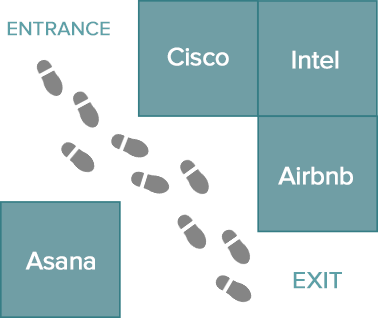
<style>
.page{position:relative;width:378px;height:318px;background:#ffffff}
.page>*{position:absolute;margin:0}
.t1{font:20px "ProximaNova-Regular";letter-spacing:-0.007em;color:#5da0a7;font-weight:bold}
.t2{font:26px "ProximaNova-Regular";letter-spacing:-0.027em;color:#ffffff;font-weight:bold}
.t3{font:24px "ProximaNova-Regular";letter-spacing:-0.007em;color:#5da0a7;font-weight:bold}
</style>
<div class="page">
<p class="t1" style="left:7px;top:21px;width:103px;height:15px">ENTRANCE</p>
<p class="t2" style="left:167px;top:47px;width:62px;height:19px">Cisco</p>
<p class="t2" style="left:292px;top:50px;width:47px;height:19px">Intel</p>
<p class="t2" style="left:278px;top:166px;width:75px;height:19px">Airbnb</p>
<p class="t2" style="left:25px;top:251px;width:70px;height:19px">Asana</p>
<p class="t3" style="left:293px;top:272px;width:49px;height:17px">EXIT</p>
</div>
